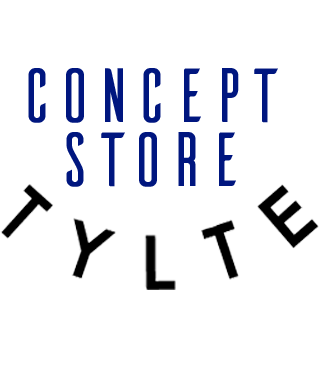
<style>
.page{position:relative;width:319px;height:366px;background:#ffffff}
.page>*{position:absolute;margin:0}
.t1{font:76.7px "Ailerons-Regular";letter-spacing:-0.1em;color:#00167f}
</style>
<div class="page">
<p class="t1" style="left:28px;top:68px;width:250px;height:119px">Concept Store</p>
</div>
